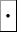
<style>
.page{position:relative;width:17px;height:32px;background:#ffffff}
.page>*{position:absolute;margin:0}
.t1{font:32px "CutC";color:#000000}
</style>
<div class="page">
<p class="t1" style="left:6px;top:14px;width:4px;height:4px">.</p>
</div>
